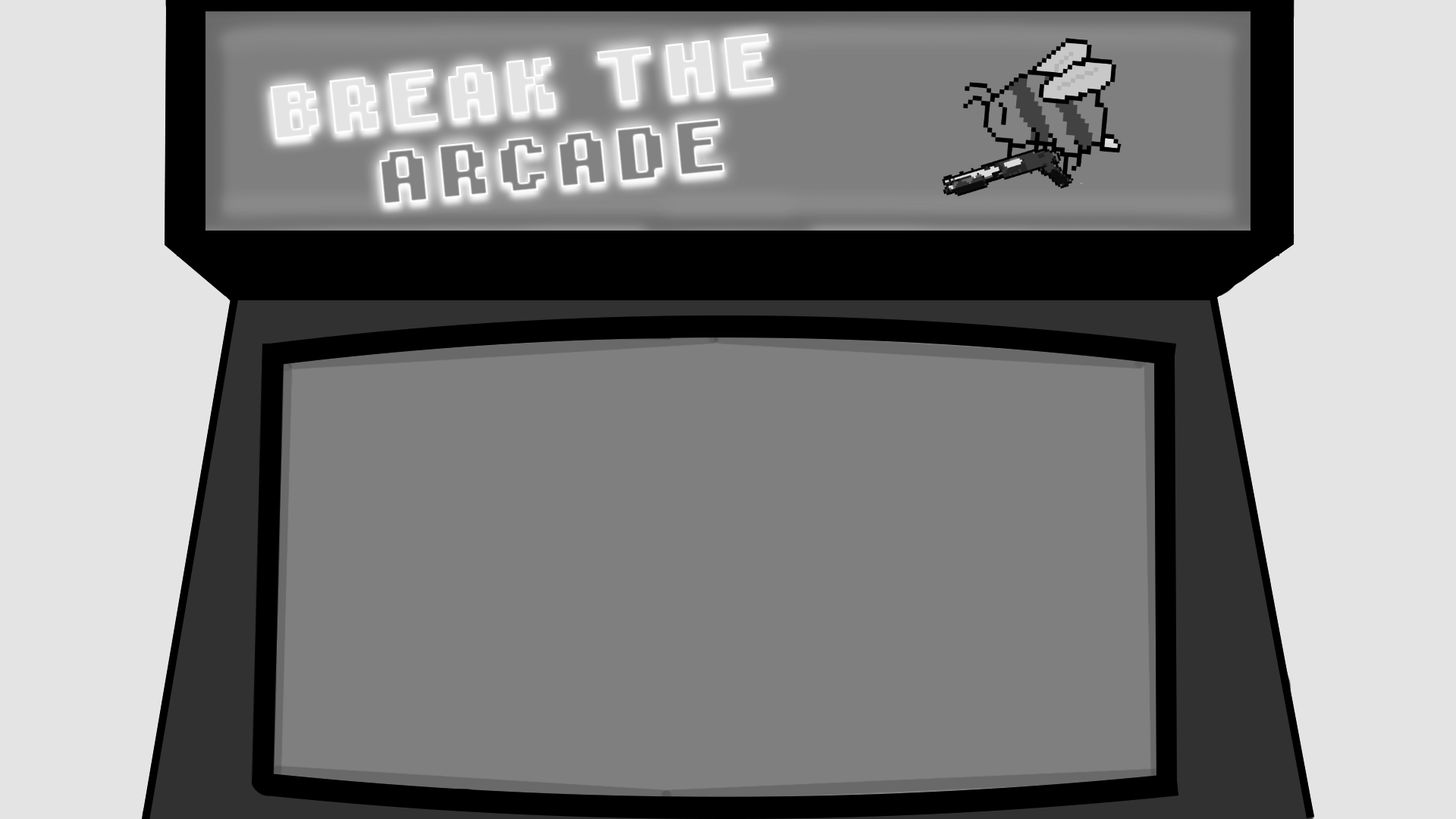
<style>
.page{position:relative;width:1456px;height:819px;background:#7f7f7f}
.page>*{position:absolute;margin:0}
.t1{font:70.9px "MousePro-Bold";letter-spacing:0.085em;color:#e4e4e4}
</style>
<div class="page">
<p class="t1" style="left:270px;top:33px;width:503px;height:107px;rotate:-6deg">BREAK THE</p>
</div>
